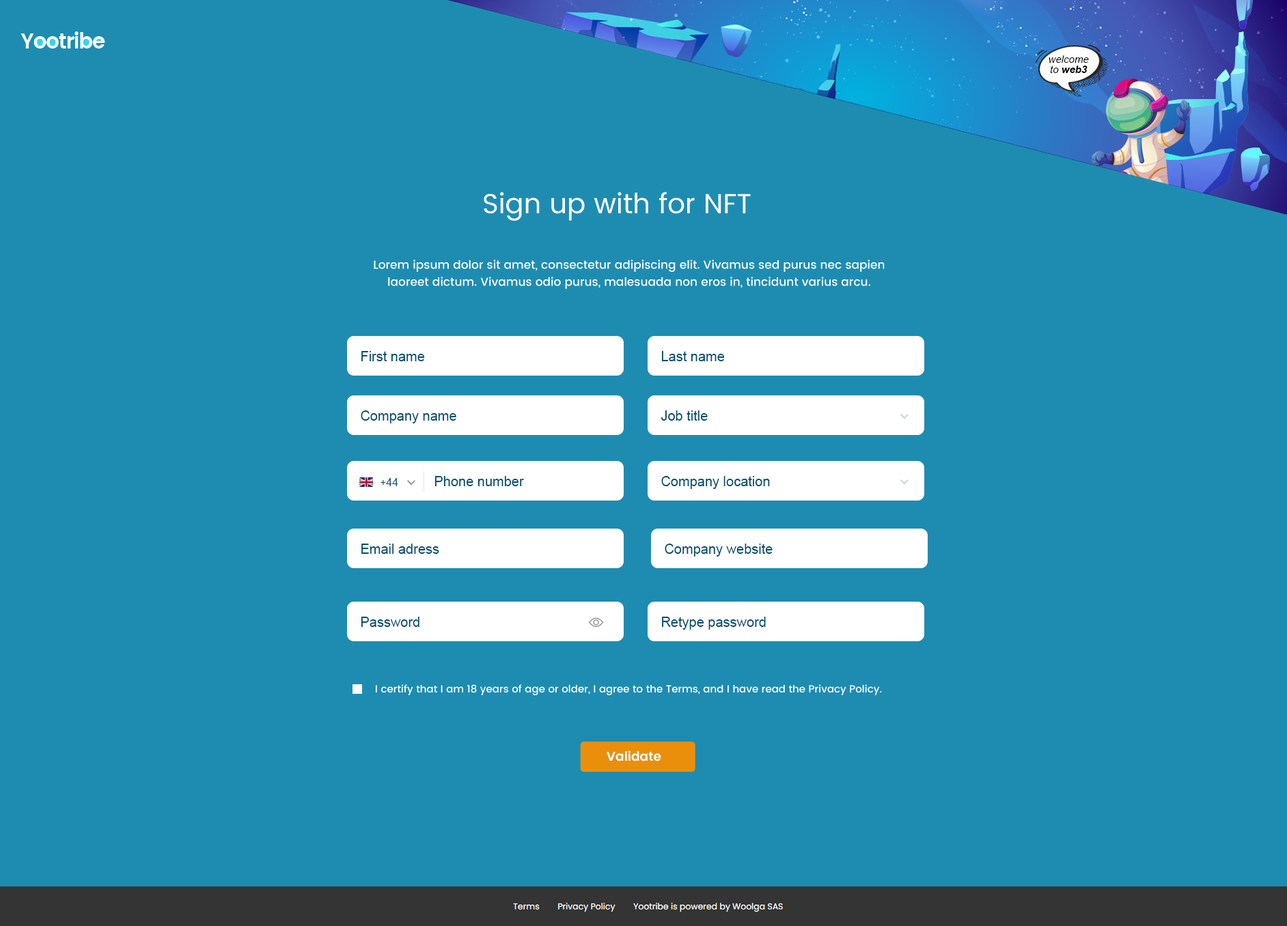
<style>
.page{position:relative;width:1287px;height:926px;background:#1e8cb1}
.page>*{position:absolute;margin:0}
.t1{font:27.7px "Poppins-Regular";color:#ffffff}
.t2{font:11.6px/17.1px "Poppins-Medium";color:#ffffff}
.t3{font:13.7px "ArialMT";color:#04506e}
.t4{font:10.9px "ArialMT";color:#04506e}
.t5{font:10.2px "ArialMT";color:#04506e}
.t6{font:10.2px "Poppins-Medium";color:#ffffff}
.t7{font:12.7px "Poppins-SemiBold";color:#ffffff}
</style>
<div class="page">
<p class="t1" style="left:484px;top:192px;width:267px;height:29px">Sign up with for NFT</p>
<p class="t2" style="left:374px;top:260px;width:511px;height:29px;text-align:center">Lorem ipsum dolor sit amet, consectetur adipiscing elit. Vivamus sed purus nec sapien laoreet dictum. Vivamus odio purus, malesuada non eros in, tincidunt varius arcu.</p>
<p class="t3" style="left:361px;top:351px;width:64px;height:10px">First name</p>
<p class="t3" style="left:661px;top:351px;width:64px;height:10px">Last name</p>
<p class="t3" style="left:361px;top:411px;width:95px;height:13px">Company name</p>
<p class="t3" style="left:661px;top:411px;width:47px;height:10px">Job title</p>
<p class="t4" style="left:381px;top:478px;width:17px;height:8px"><span class="t5">+</span>44</p>
<p class="t3" style="left:435px;top:476px;width:89px;height:10px">Phone number</p>
<p class="t3" style="left:661px;top:476px;width:109px;height:13px">Company location</p>
<p class="t3" style="left:361px;top:544px;width:78px;height:10px">Email adress</p>
<p class="t3" style="left:665px;top:544px;width:108px;height:13px">Company website</p>
<p class="t3" style="left:361px;top:617px;width:58px;height:10px">Password</p>
<p class="t3" style="left:662px;top:617px;width:104px;height:13px">Retype password</p>
<p class="t6" style="left:376px;top:685px;width:506px;height:10px">I certify that I am 18 years of age or older, I agree to the Terms, and I have read the Privacy Policy.</p>
<p class="t7" style="left:607px;top:751px;width:54px;height:11px">Validate</p>
</div>
